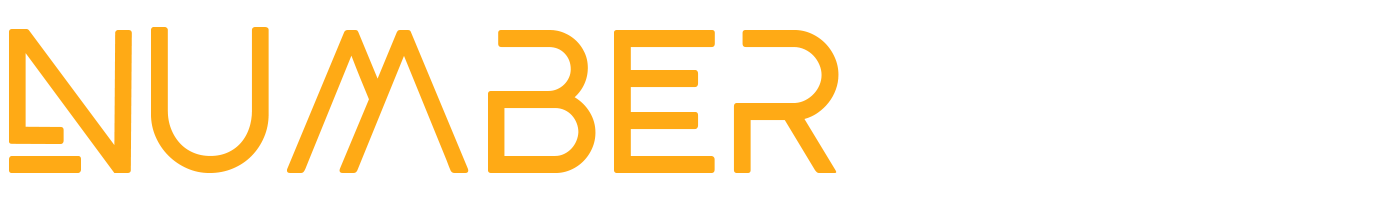
<style>
.page{position:relative;width:1386px;height:200px;background:#ffffff}
.page>*{position:absolute;margin:0}
.t1{font:200px "BEYNO";color:#ffaa15}
.t2{font:200px "BEYNO";color:#ffffff}
</style>
<div class="page">
<p class="t1" style="left:9px;top:27px;width:1368px;height:146px">NUMBER<span class="t2">LAND</span></p>
</div>
